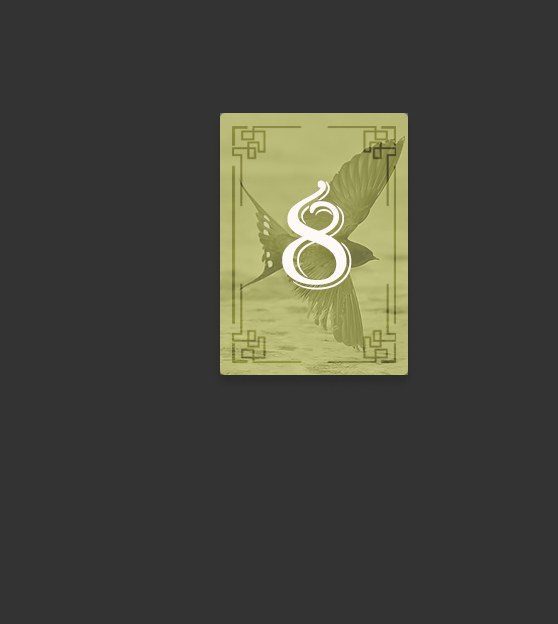
<style>
.page{position:relative;width:558px;height:624px;background:#333333}
.page>*{position:absolute;margin:0}
.t1{font:129.2px "Algerian";letter-spacing:0.1em;color:#fef8f7;text-transform:uppercase}
</style>
<div class="page">
<p class="t1" style="left:282px;top:180px;width:70px;height:110px">8</p>
</div>
